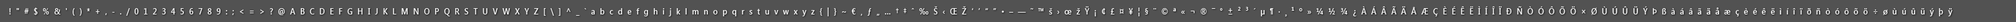
<style>
.page{position:relative;width:2016px;height:22px;background:#525252}
.page>*{position:absolute;margin:0}
.t1{font:9px "SegoeUI-SemiBold";letter-spacing:0.6em;color:#ffffff;scale:0.88 1}
</style>
<div class="page">
<p class="t1" style="left:9px;top:6px;width:1943px;height:11px">!"#$%&amp;'()*+,-./0123456789:;&lt;=&gt;?@ABCDEFGHIJKLMNOPQRSTUVWXYZ[\]^_`abcdefghijklmnopqrstuvwxyz{|}~€‚ƒ„…†‡ˆ‰Š‹ŒŽ‘’“”•–—˜™š›œžŸ¡¢£¤¥¦§¨©ª«¬®¯°±²³´µ¶·¸¹º»¼½¾¿ÀÁÂÃÄÅÆÇÈÉÊËÌÍÎÏÐÑÒÓÔÕÖ×ØÙÚÛÜÝÞßàáâãäåæçèéêëìíîïðñòóôõö÷øùúûüýþÿ</p>
</div>
